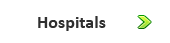
<style>
.page{position:relative;width:170px;height:43px;background:#ffffff}
.page>*{position:absolute;margin:0}
.t1{font:18px "Calibri-Bold";color:#2f2f2f}
</style>
<div class="page">
<p class="t1" style="left:38px;top:16px;width:68px;height:15px">Hospitals</p>
</div>
